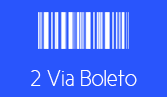
<style>
.page{position:relative;width:167px;height:97px;background:#2955fc}
.page>*{position:absolute;margin:0}
.t1{font:22.7px "CicleFina";color:#ffffff}
</style>
<div class="page">
<p class="t1" style="left:31px;top:70px;width:106px;height:16px">2 Via Boleto</p>
</div>
